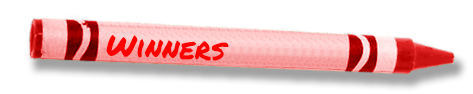
<style>
.page{position:relative;width:473px;height:94px;background:#ffffff}
.page>*{position:absolute;margin:0}
.t1{font:30px "PermanentMarker";color:#ff0000}
</style>
<div class="page">
<p class="t1" style="left:106px;top:35px;width:123px;height:26px;rotate:2deg">Winners</p>
</div>
